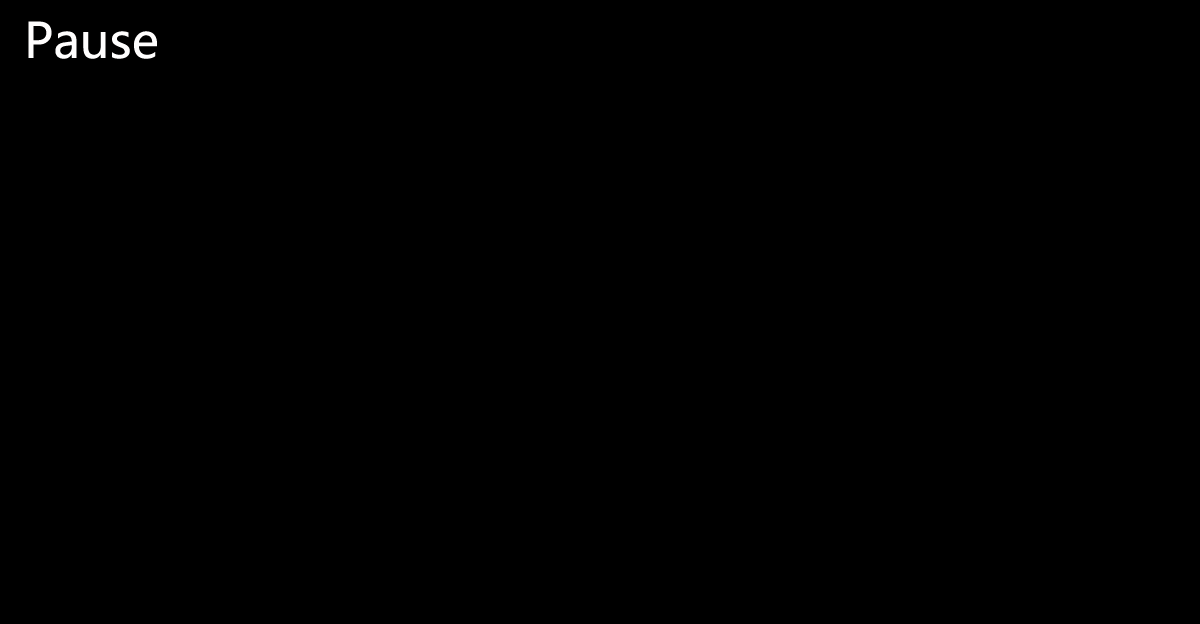
<style>
.page{position:relative;width:1200px;height:624px;background:#000000}
.page>*{position:absolute;margin:0}
.t1{font:48px "MicrosoftYaHei";color:#fffefe}
</style>
<div class="page">
<p class="t1" style="left:28px;top:21px;width:129px;height:38px">Pause</p>
</div>
